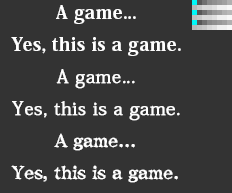
<style>
.page{position:relative;width:232px;height:193px;background:#333333}
.page>*{position:absolute;margin:0}
.t1{font:18px/32px "KozMinPro-Heavy";letter-spacing:0.03em;color:#ffffff}
.t2{font:18px/32px "AdobeFangsongStd-Regular";letter-spacing:0.025em;color:#ffffff;font-weight:bold}
.t3{font:18px/32px "ComicMysteryStd-DB";letter-spacing:-0.02em;color:#ffffff}
</style>
<div class="page">
<p class="t1" style="left:11px;top:5px;width:170px;height:178px;text-align:center">A game...<br>Yes, this is a game.<br><span class="t2">A game...<br>Yes, this is a game.<br></span><span class="t3">A game...<br>Yes, this is a game.</span></p>
</div>
